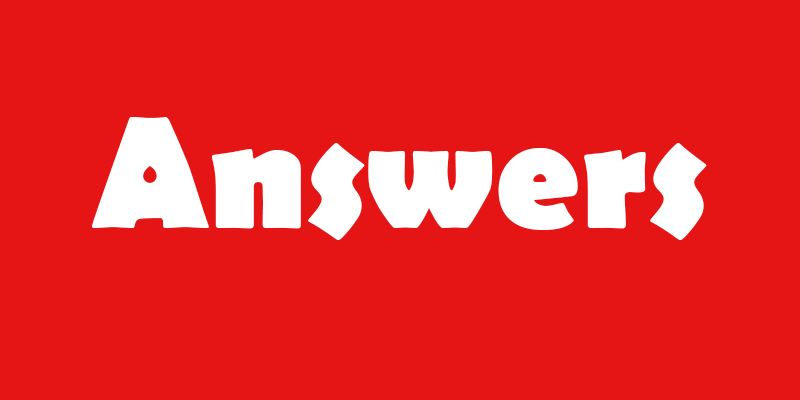
<style>
.page{position:relative;width:800px;height:400px;background:#e51515}
.page>*{position:absolute;margin:0}
.t1{font:160px "BerlinSansFB-Bold";color:#ffffff}
</style>
<div class="page">
<p class="t1" style="left:92px;top:117px;width:615px;height:123px">Answers</p>
</div>
